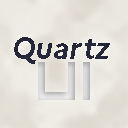
<style>
.page{position:relative;width:128px;height:128px}
.page>*{position:absolute;margin:0}
.t1{font:30px "Marianne-BoldItalic";color:#252837}
.t2{font:60px "Android101";color:#d6d6d6}
</style>
<div class="page">
<p class="t1" style="left:14px;top:37px;width:96px;height:27px">Quartz</p>
<p class="t2" style="left:38px;top:62px;width:52px;height:38px">UI</p>
</div>
